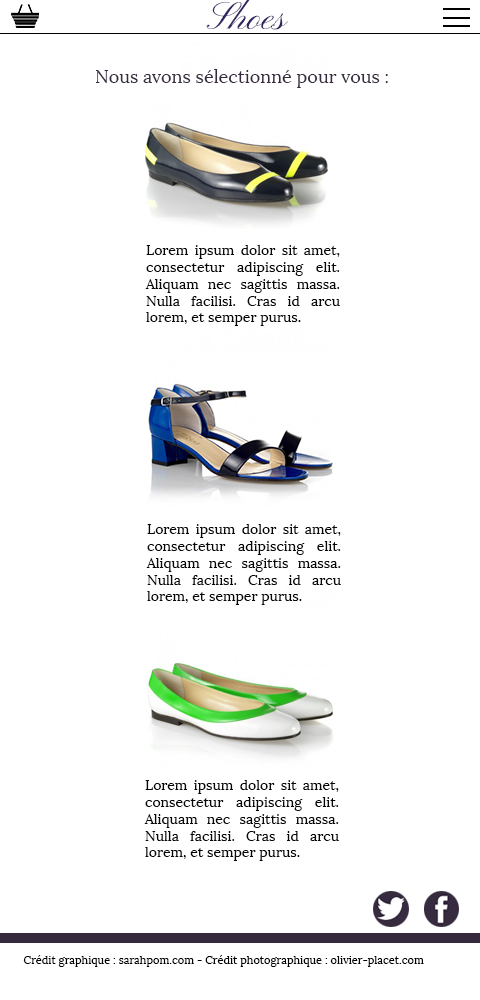
<style>
.page{position:relative;width:480px;height:1000px;background:#ffffff}
.page>*{position:absolute;margin:0}
.t1{font:39.4px "PinyonScript";color:#302663}
.t2{font:18px "Lora-Regular";color:#372b3f}
.t3{font:14px "Lora-Regular";color:#070707}
.t4{font:11px "Lora-Regular";color:#000000}
</style>
<div class="page">
<p class="t1" style="left:206px;top:0px;width:82px;height:30px">Shoes</p>
<p class="t2" style="left:95px;top:69px;width:293px;height:19px">Nous avons sélectionné pour vous :</p>
<p class="t3" style="left:145px;top:245px;width:195px;height:81px;text-align:justify">Lorem ipsum dolor sit amet, consectetur adipiscing elit. Aliquam nec sagittis massa. Nulla facilisi. Cras id arcu lorem, et semper purus.</p>
<p class="t3" style="left:146px;top:524px;width:195px;height:81px;text-align:justify">Lorem ipsum dolor sit amet, consectetur adipiscing elit. Aliquam nec sagittis massa. Nulla facilisi. Cras id arcu lorem, et semper purus.</p>
<p class="t3" style="left:144px;top:780px;width:195px;height:81px;text-align:justify">Lorem ipsum dolor sit amet, consectetur adipiscing elit. Aliquam nec sagittis massa. Nulla facilisi. Cras id arcu lorem, et semper purus.</p>
<p class="t4" style="left:23px;top:955px;width:401px;height:12px">Crédit graphique : sarahpom.com - Crédit photographique : olivier-placet.com</p>
</div>
